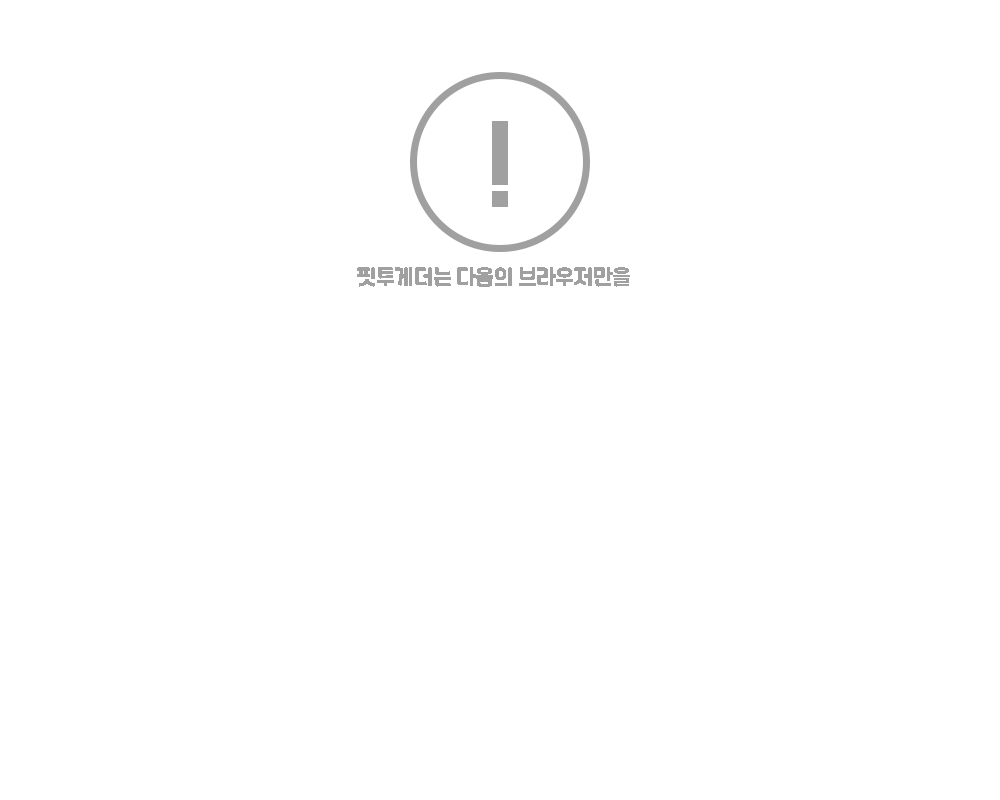
<style>
.page{position:relative;width:1000px;height:800px;background:#ffffff}
.page>*{position:absolute;margin:0}
.t1{font:90px "RecipekoreaM";letter-spacing:-0.04em;color:#a0a0a0}
.t2{font:20px "RecipekoreaM";letter-spacing:-0.04em;color:#a0a0a0}
</style>
<div class="page">
<p class="t1" style="left:492px;top:121px;width:16px;height:86px">!</p>
<p class="t2" style="left:357px;top:267px;width:273px;height:20px">핏투게더는 다음의 브라우저만을</p>
</div>
